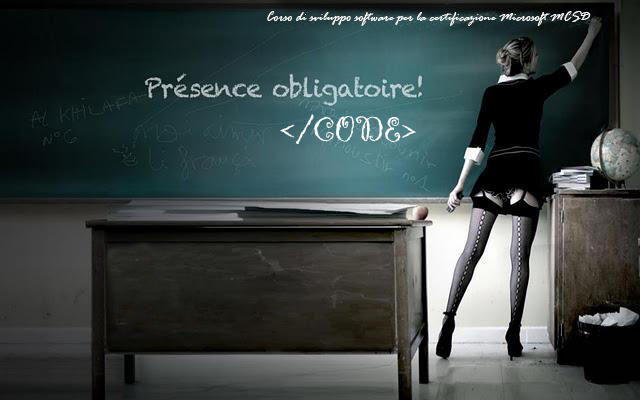
<style>
.page{position:relative;width:640px;height:400px}
.page>*{position:absolute;margin:0}
.t1{font:14px "RageItalic";color:#ffffff}
.t2{font:36px "Gigi-Regular";color:#ffffff}
</style>
<div class="page">
<p class="t1" style="left:267px;top:11px;width:324px;height:15px">Corso di sviluppo software per la certificazione Microsoft MCSD</p>
<p class="t2" style="left:280px;top:114px;width:136px;height:30px">&lt;/CODE&gt;</p>
</div>
